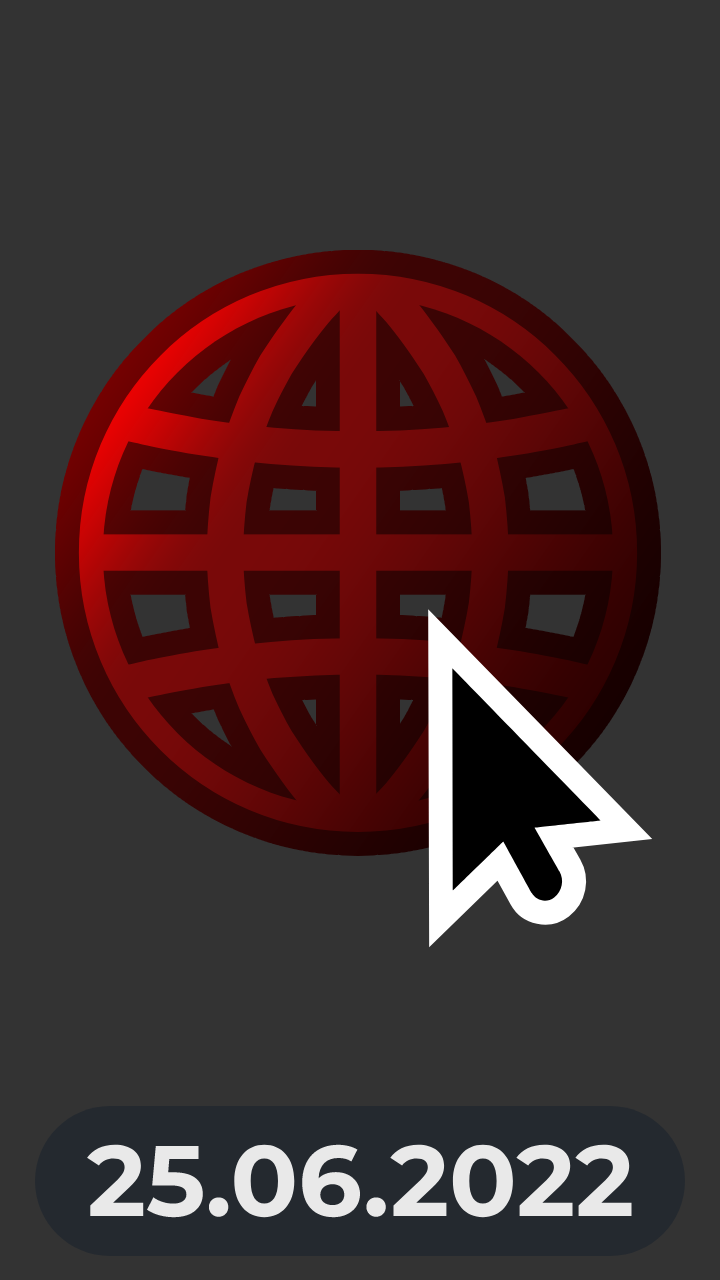
<style>
.page{position:relative;width:720px;height:1280px;background:#333333}
.page>*{position:absolute;margin:0}
.t1{font:100px "Montserrat-Bold";color:#e9e9e9}
</style>
<div class="page">
<p class="t1" style="left:87px;top:1144px;width:545px;height:74px">25.06.2022</p>
</div>
